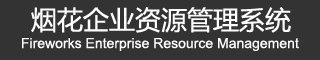
<style>
.page{position:relative;width:320px;height:60px;background:#333333}
.page>*{position:absolute;margin:0}
.t1{font:26px "MicrosoftYaHei";color:#ffffff}
.t2{font:14px "ArialMT";color:#ffffff}
</style>
<div class="page">
<p class="t1" style="left:31px;top:7px;width:260px;height:26px">烟花企业资源管理系统</p>
<p class="t2" style="left:22px;top:38px;width:277px;height:13px">Fireworks Enterprise Resource Management</p>
</div>
